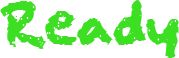
<style>
.page{position:relative;width:179px;height:58px;background:#ffffff}
.page>*{position:absolute;margin:0}
.t1{font:50px "squeakychalksound";color:#3cdf21}
</style>
<div class="page">
<p class="t1" style="left:0px;top:0px;width:179px;height:58px">Ready</p>
</div>
